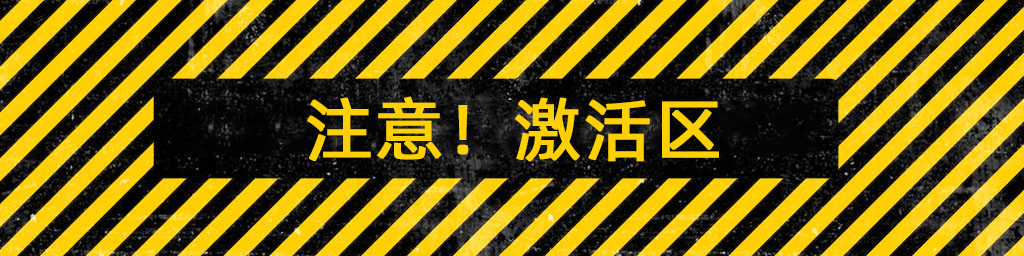
<style>
.page{position:relative;width:1024px;height:256px}
.page>*{position:absolute;margin:0}
.t1{font:69px "AlibabaPuHuiTiR";color:#fdd004;font-weight:bold}
</style>
<div class="page">
<p class="t1" style="left:307px;top:96px;width:412px;height:66px">注意！激活区</p>
</div>
